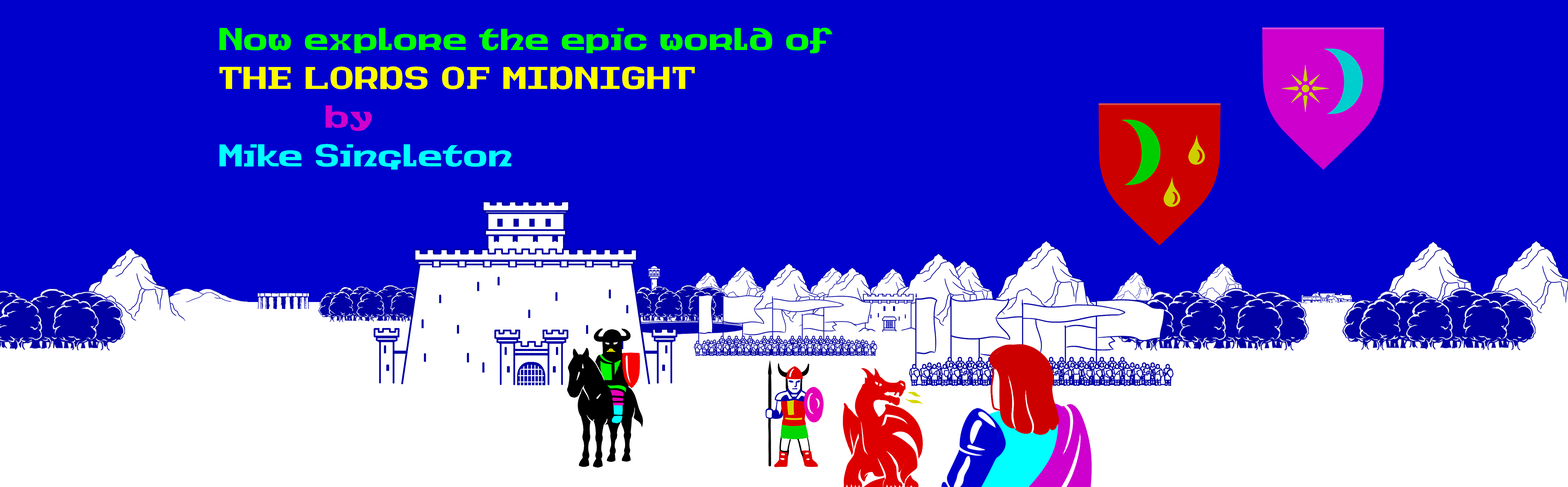
<style>
.page{position:relative;width:1568px;height:487px;background:#0000cd}
.page>*{position:absolute;margin:0}
.t1{font:32.3px "MidnightBlack";color:#00ff00}
.t2{font:32.3px "MidnightBlack";color:#fdfd00}
.t3{font:32.3px "MidnightBlack";color:#cd00cd}
.t4{font:32.3px "MidnightBlack";color:#00ffff}
</style>
<div class="page">
<p class="t1" style="left:219px;top:27px;width:613px;height:143px">Now explore the epic world of <br><span class="t2">THE LORDS OF MIDNIGHT<br>         </span><span class="t3">by<br></span><span class="t4">Mike Singleton</span></p>
</div>
